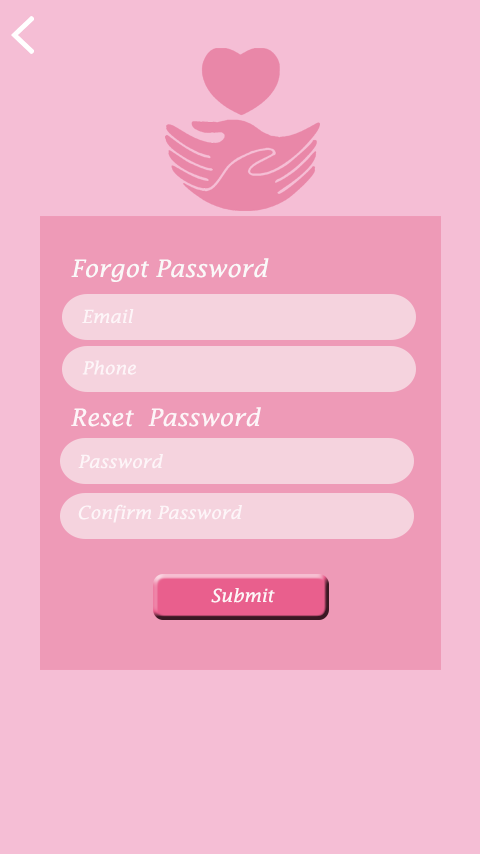
<style>
.page{position:relative;width:480px;height:854px;background:#f5bed5}
.page>*{position:absolute;margin:0}
.t1{font:24px "LucidaFax-Italic";color:#faf9f9}
.t2{font:18px "LucidaFax-Italic";color:#fdf5f8}
.t3{font:17.8px "LucidaFax-Italic";color:#fdf5f8}
.t4{font:24px "LucidaFax-Italic";color:#fdf5f8}
</style>
<div class="page">
<p class="t1" style="left:71px;top:258px;width:198px;height:24px">Forgot Password</p>
<p class="t2" style="left:82px;top:309px;width:52px;height:15px">Email</p>
<p class="t3" style="left:82px;top:360px;width:54px;height:15px">Phone</p>
<p class="t4" style="left:71px;top:407px;width:190px;height:20px">Reset  Password</p>
<p class="t2" style="left:78px;top:454px;width:85px;height:15px">Password</p>
<p class="t2" style="left:78px;top:504px;width:164px;height:19px">Confirm Password</p>
<p class="t2" style="left:211px;top:588px;width:64px;height:15px">Submit</p>
</div>
